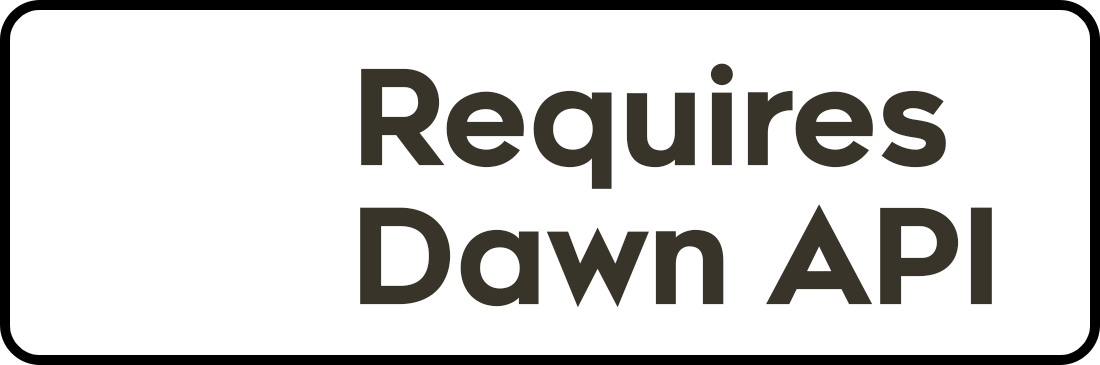
<style>
.page{position:relative;width:1100px;height:365px;background:#ffffff}
.page>*{position:absolute;margin:0}
.t1{font:131.7px "Renogare-Regular";letter-spacing:-0.05em;color:#38342a;font-weight:bold}
</style>
<div class="page">
<p class="t1" style="left:361px;top:63px;width:585px;height:126px">Requires</p>
<p class="t1" style="left:360px;top:204px;width:632px;height:104px">Dawn API</p>
</div>
